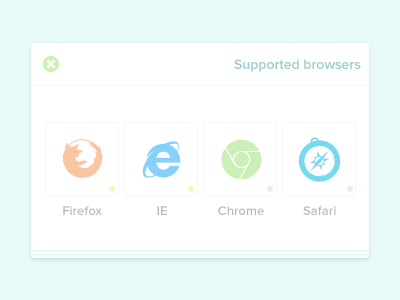
<style>
.page{position:relative;width:400px;height:300px;background:#ffffff}
.page>*{position:absolute;margin:0}
.t1{font:13px "ProximaNova-Semibold";color:#adaaac}
</style>
<div class="page">
<p class="t1" style="left:63px;top:206px;width:39px;height:9px">Firefox</p>
<p class="t1" style="left:157px;top:206px;width:10px;height:9px">IE</p>
<p class="t1" style="left:218px;top:206px;width:46px;height:9px">Chrome</p>
<p class="t1" style="left:303px;top:206px;width:33px;height:9px">Safari</p>
</div>
